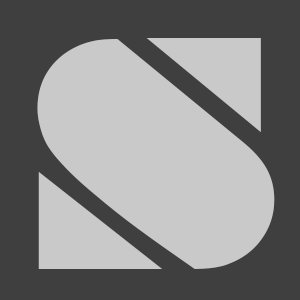
<style>
.page{position:relative;width:300px;height:300px;background:#3f3f3f}
.page>*{position:absolute;margin:0}
.t1{font:300px "Braggadocio";color:#cacaca}
</style>
<div class="page">
<p class="t1" style="left:37px;top:38px;width:238px;height:231px">S</p>
</div>
